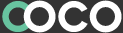
<style>
.page{position:relative;width:123px;height:33px;background:#333333}
.page>*{position:absolute;margin:0}
.t1{font:43px "COUTURE-Bold";color:#ffffff}
.t2{font:43px "COUTURE-Bold";letter-spacing:-0.22em;color:#68c39f}
</style>
<div class="page">
<p class="t1" style="left:2px;top:0px;width:120px;height:33px"><span class="t2">C</span>OCO</p>
</div>
